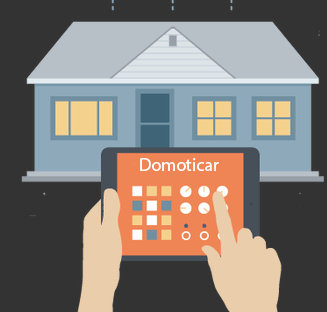
<style>
.page{position:relative;width:327px;height:312px;background:#333333}
.page>*{position:absolute;margin:0}
.t1{font:18px "MyriadPro-Regular";color:#ffffff}
</style>
<div class="page">
<p class="t1" style="left:140px;top:158px;width:79px;height:13px">Domoticar</p>
</div>
